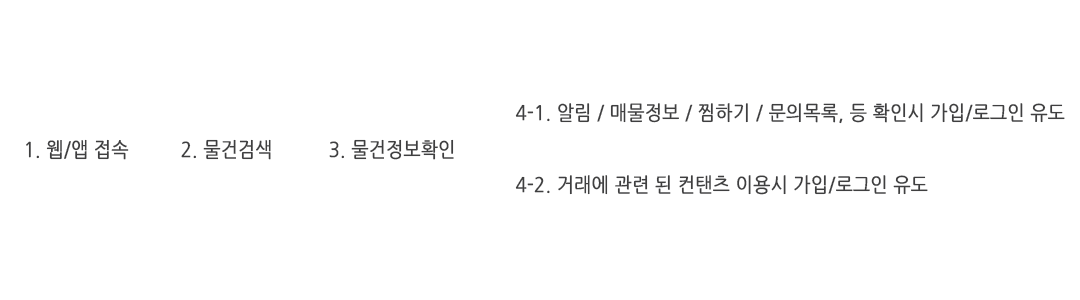
<style>
.page{position:relative;width:1080px;height:300px;background:#ffffff}
.page>*{position:absolute;margin:0}
.t1{font:20.1px "NanumGothic";color:#3f3f40;font-weight:bold;scale:0.9 1}
.t2{font:20.4px "NanumGothic";color:#3f3f40;font-weight:bold;scale:0.88 1}
</style>
<div class="page">
<p class="t1" style="left:515px;top:103px;width:550px;height:21px">4-1. 알림 / 매물정보 / 찜하기 / 문의목록, 등 확인시 가입/로그인 유도</p>
<p class="t2" style="left:26px;top:139px;width:103px;height:21px">1. 웹/앱 접속</p>
<p class="t2" style="left:181px;top:139px;width:90px;height:21px">2. 물건검색</p>
<p class="t2" style="left:329px;top:139px;width:125px;height:21px">3. 물건정보확인</p>
<p class="t1" style="left:515px;top:175px;width:413px;height:20px">4-2. 거래에 관련 된 컨탠츠 이용시 가입/로그인 유도</p>
</div>
